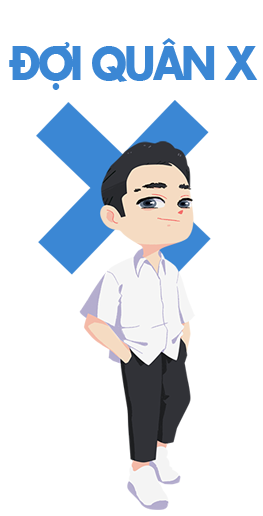
<style>
.page{position:relative;width:263px;height:516px;background:#ffffff}
.page>*{position:absolute;margin:0}
.t1{font:44px "SFUFuturaBold";letter-spacing:-0.075em;color:#3b87d4;scale:0.92 1}
</style>
<div class="page">
<p class="t1" style="left:9px;top:38px;width:249px;height:52px">ĐỢI QUÂN X</p>
</div>
